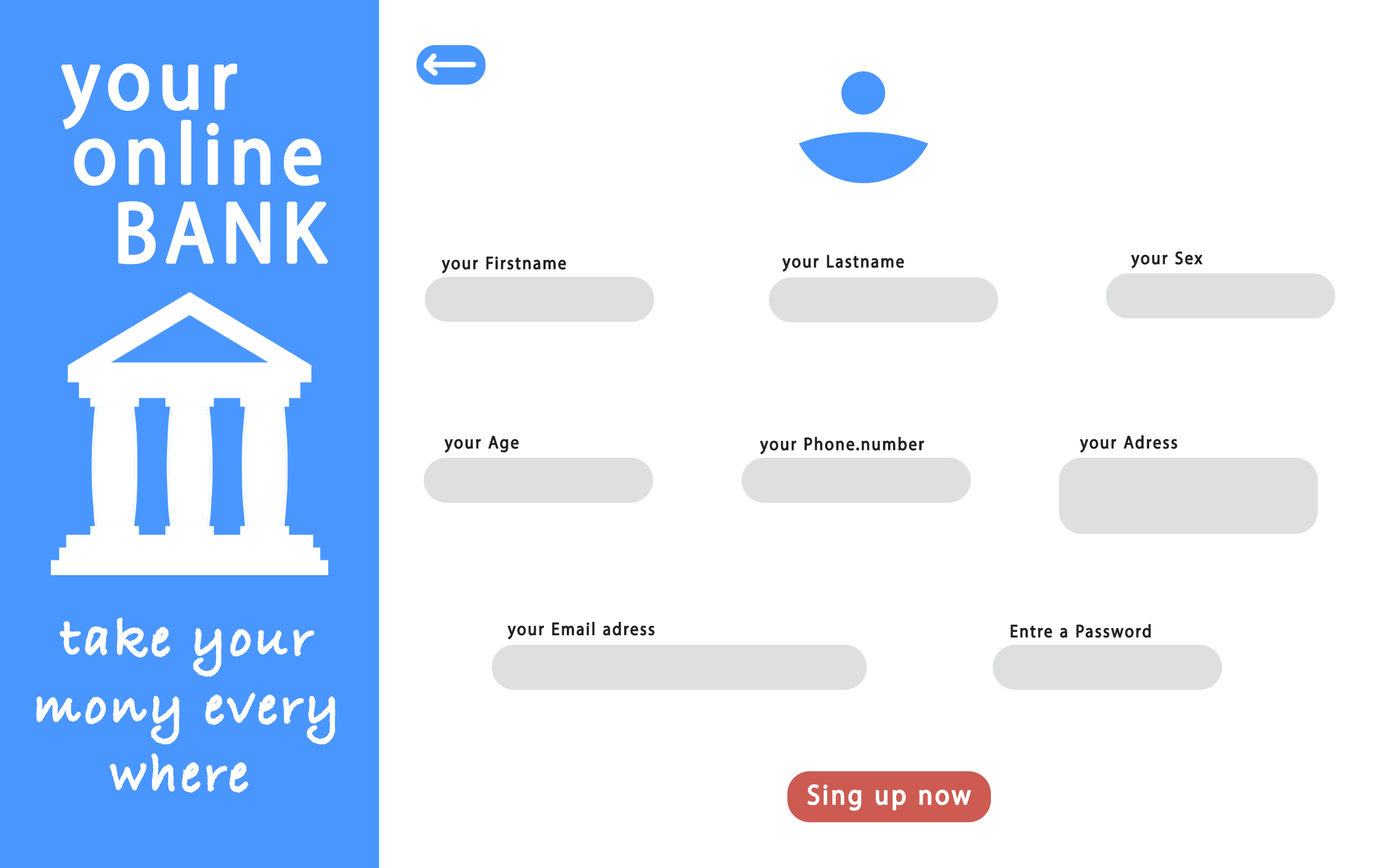
<style>
.page{position:relative;width:1373px;height:868px;background:#ffffff}
.page>*{position:absolute;margin:0}
.t1{font:121.7px "MyriadArabic-Regular";letter-spacing:0.05em;color:#ffffff;font-weight:bold;scale:0.92 1}
.t2{font:25.1px "MyriadArabic-Regular";letter-spacing:0.05em;color:#242121;font-weight:bold;scale:0.92 1}
.t3{font:56.1px/67.7px "BradleyHandITCTT-Bold";letter-spacing:0.05em;color:#ffffff;font-weight:bold;scale:0.92 1}
.t4{font:39.5px "MyriadArabic-Regular";letter-spacing:0.05em;color:#ffffff;font-weight:bold;scale:0.92 1}
</style>
<div class="page">
<p class="t1" style="left:61px;top:63px;width:176px;height:67px">your</p>
<p class="t1" style="left:74px;top:120px;width:247px;height:66px">online</p>
<p class="t1" style="left:118px;top:201px;width:211px;height:64px">BANK</p>
<p class="t2" style="left:442px;top:256px;width:124px;height:17px">your Firstname</p>
<p class="t2" style="left:782px;top:255px;width:122px;height:17px">your Lastname</p>
<p class="t2" style="left:1131px;top:251px;width:72px;height:17px">your Sex</p>
<p class="t2" style="left:444px;top:436px;width:75px;height:17px">your Age</p>
<p class="t2" style="left:760px;top:437px;width:164px;height:17px">your Phone.number</p>
<p class="t2" style="left:1080px;top:435px;width:98px;height:18px">your Adress</p>
<p class="t3" style="left:36px;top:618px;width:300px;height:175px;text-align:center">take your <br>mony every <br>where</p>
<p class="t2" style="left:507px;top:622px;width:148px;height:18px">your Email adress</p>
<p class="t2" style="left:1011px;top:624px;width:140px;height:14px">Entre a Password</p>
<p class="t4" style="left:808px;top:784px;width:163px;height:27px">Sing up now</p>
</div>
